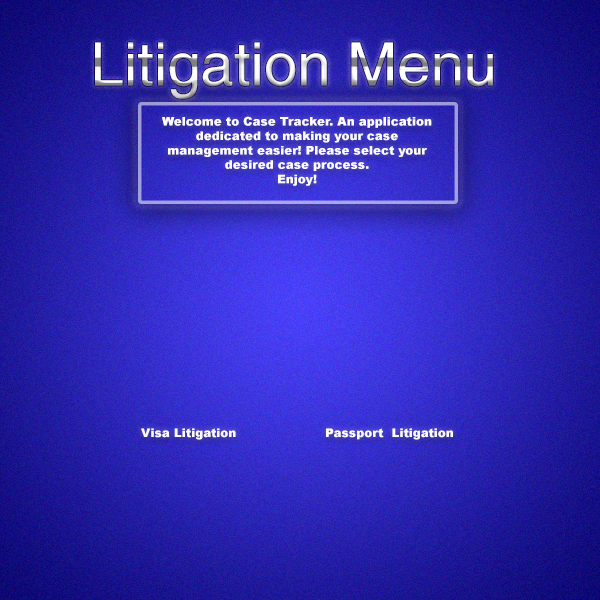
<style>
.page{position:relative;width:600px;height:600px}
.page>*{position:absolute;margin:0}
.t1{font:60px "Helvetica"}
.t2{font:12px "Arial-Black";color:#fbf8f8}
</style>
<div class="page">
<p class="t1" style="left:95px;top:42px;width:398px;height:57px">Litigation Menu</p>
<p class="t2" style="left:162px;top:116px;width:270px;height:70px;text-align:center">Welcome to Case Tracker. An application dedicated to making your case management easier! Please select your desired case process. <br>Enjoy!</p>
<p class="t2" style="left:141px;top:428px;width:312px;height:12px">Visa Litigation               Passport  Litigation</p>
</div>
